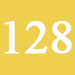
<style>
.page{position:relative;width:75px;height:75px;background:#efcf50}
.page>*{position:absolute;margin:0}
.t1{font:48px "TimesNewRomanPSMT";color:#ffffff;font-weight:bold}
</style>
<div class="page">
<p class="t1" style="left:4px;top:21px;width:68px;height:33px">128</p>
</div>
